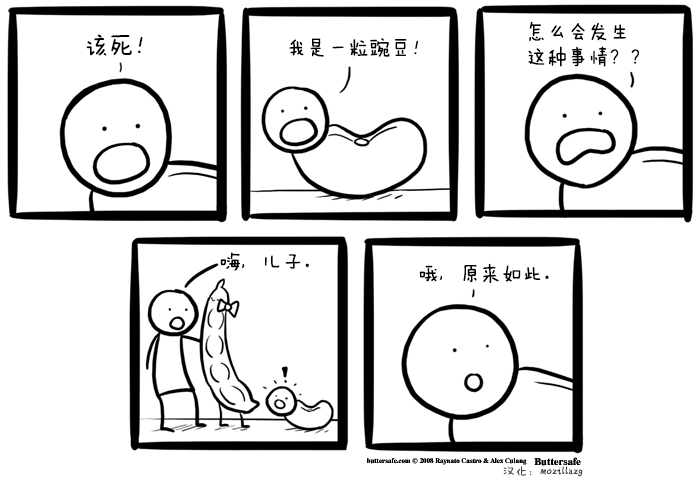
<style>
.page{position:relative;width:699px;height:480px;background:#ffffff}
.page>*{position:absolute;margin:0}
.t1{font:20.8px/25px "FZMWJW--GB1-0";color:#000000}
.t2{font:25px "FZMWJW--GB1-0";color:#000000}
.t3{font:20.8px "FZMWJW--GB1-0";color:#000000}
.t4{font:12.5px "FZMWJW--GB1-0";color:#444444}
</style>
<div class="page">
<p class="t1" style="left:528px;top:21px;width:111px;height:46px">怎么会发生<br>这种事情？？</p>
<p class="t2" style="left:86px;top:34px;width:57px;height:22px">该死！</p>
<p class="t3" style="left:289px;top:38px;width:129px;height:19px">我是一粒豌豆！</p>
<p class="t3" style="left:220px;top:252px;width:89px;height:19px">嗨，儿子。</p>
<p class="t3" style="left:419px;top:263px;width:130px;height:21px">哦，原来如此。</p>
<p class="t4" style="left:503px;top:466px;width:80px;height:11px">汉化：mozillazg</p>
</div>
